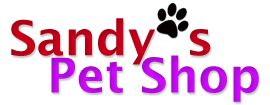
<style>
.page{position:relative;width:270px;height:105px;background:#ffffff}
.page>*{position:absolute;margin:0}
.t1{font:48px "LucidaSans-Demi";color:#cf001a}
.t2{font:48px "LucidaSans-Demi";color:#bc0ae8}
</style>
<div class="page">
<p class="t1" style="left:11px;top:18px;width:200px;height:47px">Sandy  s</p>
<p class="t2" style="left:51px;top:55px;width:208px;height:47px">Pet Shop</p>
</div>
